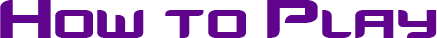
<style>
.page{position:relative;width:437px;height:38px;background:#ffffff}
.page>*{position:absolute;margin:0}
.t1{font:75px "Counter-StrikeRegular";color:#61048d}
</style>
<div class="page">
<p class="t1" style="left:0px;top:0px;width:437px;height:38px">How to Play</p>
</div>
